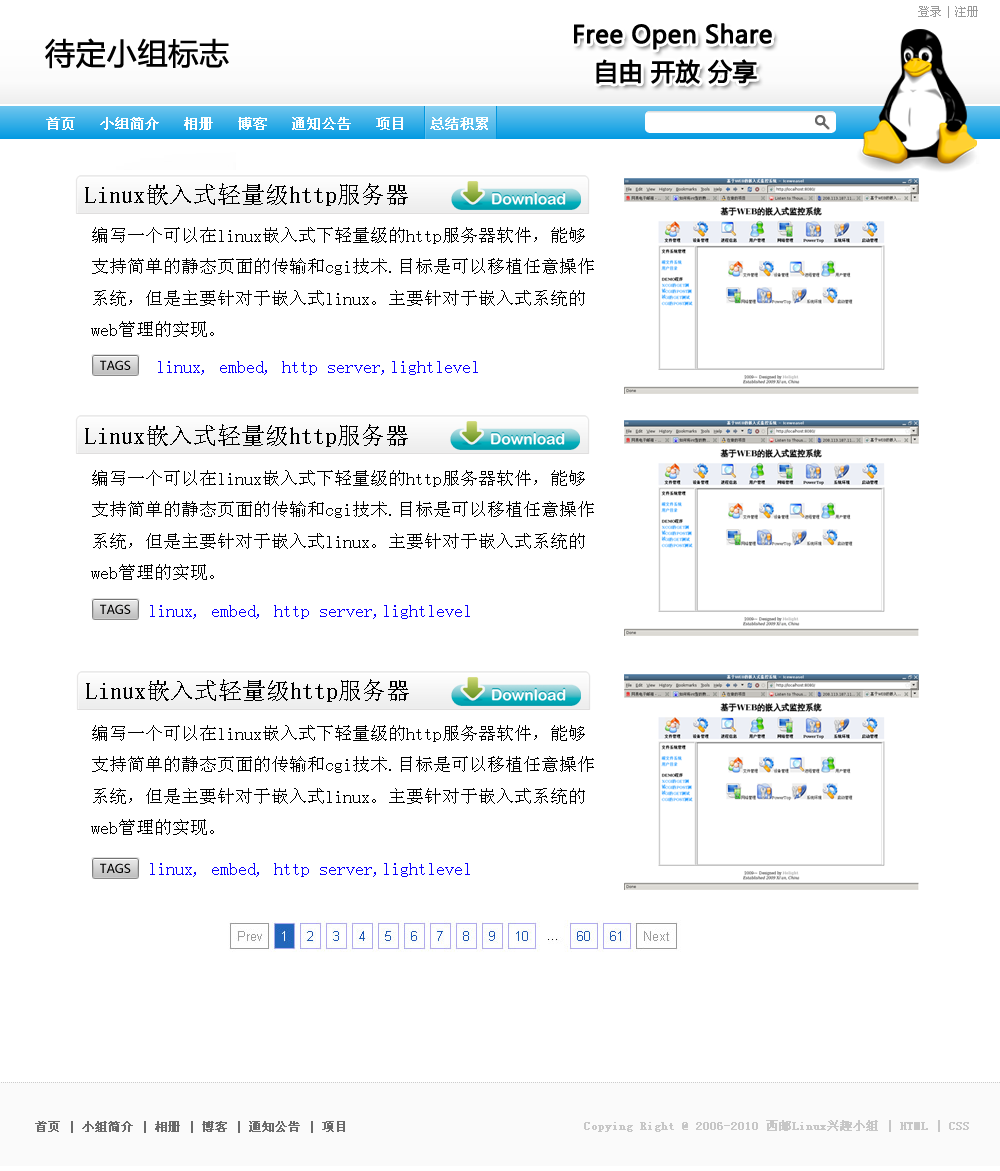
<style>
.page{position:relative;width:1000px;height:1171px;background:#ffffff}
.page>*{position:absolute;margin:0}
.t1{font:24px "SimSun";color:#000000}
.t2{font:18px "SimSun";color:#000000}
.t3{font:18px "SimSun";color:#0c00fd}
</style>
<div class="page">
<p class="t1" style="left:85px;top:183px;width:323px;height:23px">Linux嵌入式轻量级http服务器</p>
<p class="t2" style="left:91px;top:227px;width:503px;height:110px">编写一个可以在linux嵌入式下轻量级的http服务器软件，能够<br>支持简单的静态页面的传输和cgi技术.目标是可以移植任意操作<br>系统，但是主要针对于嵌入式linux。主要针对于嵌入式系统的<br>web管理的实现。</p>
<p class="t3" style="left:158px;top:361px;width:320px;height:14px">linux, embed, http server,lightlevel</p>
<p class="t1" style="left:85px;top:424px;width:323px;height:23px">Linux嵌入式轻量级http服务器</p>
<p class="t2" style="left:91px;top:470px;width:503px;height:110px">编写一个可以在linux嵌入式下轻量级的http服务器软件，能够<br>支持简单的静态页面的传输和cgi技术.目标是可以移植任意操作<br>系统，但是主要针对于嵌入式linux。主要针对于嵌入式系统的<br>web管理的实现。</p>
<p class="t3" style="left:150px;top:605px;width:320px;height:14px">linux, embed, http server,lightlevel</p>
<p class="t1" style="left:86px;top:679px;width:323px;height:23px">Linux嵌入式轻量级http服务器</p>
<p class="t2" style="left:91px;top:725px;width:503px;height:110px">编写一个可以在linux嵌入式下轻量级的http服务器软件，能够<br>支持简单的静态页面的传输和cgi技术.目标是可以移植任意操作<br>系统，但是主要针对于嵌入式linux。主要针对于嵌入式系统的<br>web管理的实现。</p>
<p class="t3" style="left:150px;top:863px;width:320px;height:14px">linux, embed, http server,lightlevel</p>
</div>
